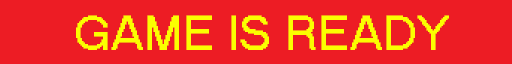
<style>
.page{position:relative;width:512px;height:64px;background:#ed1c24}
.page>*{position:absolute;margin:0}
.t1{font:48px "MS Sans Serif";color:#fbfe00}
</style>
<div class="page">
<p class="t1" style="left:76px;top:15px;width:373px;height:35px">GAME IS READY</p>
</div>
